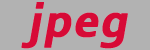
<style>
.page{position:relative;width:150px;height:50px;background:#b2b2b2}
.page>*{position:absolute;margin:0}
.t1{font:48px "Corbel-Bold";letter-spacing:0.025em;color:#d70a36;font-weight:bold;font-style:italic}
</style>
<div class="page">
<p class="t1" style="left:21px;top:2px;width:107px;height:47px">jpeg</p>
</div>
